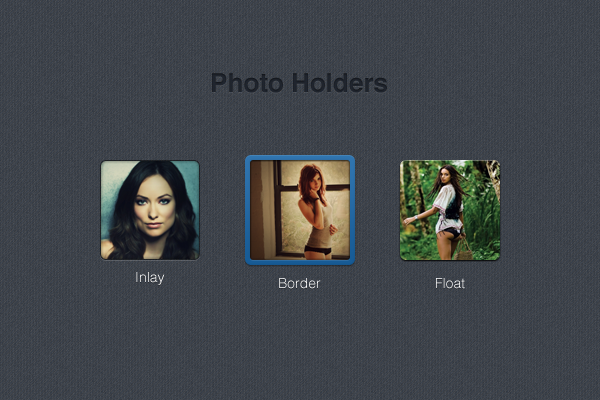
<style>
.page{position:relative;width:600px;height:400px}
.page>*{position:absolute;margin:0}
.t1{font:26px "Helvetica-Bold";color:#20252e}
.t2{font:14px "Helvetica-Light"}
.t3{font:14px "Helvetica-Light";color:#ffffff}
</style>
<div class="page">
<p class="t1" style="left:212px;top:73px;width:175px;height:20px">Photo Holders</p>
<p class="t2" style="left:136px;top:272px;width:29px;height:13px">Inlay</p>
<p class="t3" style="left:279px;top:278px;width:42px;height:11px">Border</p>
<p class="t3" style="left:436px;top:278px;width:29px;height:11px">Float</p>
</div>
